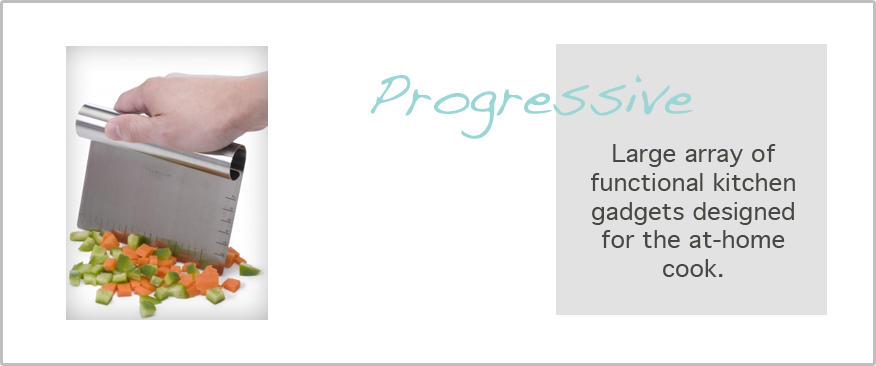
<style>
.page{position:relative;width:876px;height:366px;background:#ffffff}
.page>*{position:absolute;margin:0}
.t1{font:60px "Handwriting-Dakota";color:#9bd5d5}
.t2{font:24px "Geneva";color:#484743}
</style>
<div class="page">
<p class="t1" style="left:370px;top:74px;width:324px;height:65px">Progressive</p>
<p class="t2" style="left:591px;top:144px;width:204px;height:133px;text-align:center">Large array of functional kitchen gadgets designed for the at-home cook.</p>
</div>
